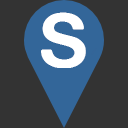
<style>
.page{position:relative;width:128px;height:128px;background:#333333}
.page>*{position:absolute;margin:0}
.t1{font:75px "AlteHaasGrotesk_Bold";color:#ffffff}
</style>
<div class="page">
<p class="t1" style="left:41px;top:12px;width:45px;height:56px">S</p>
</div>
